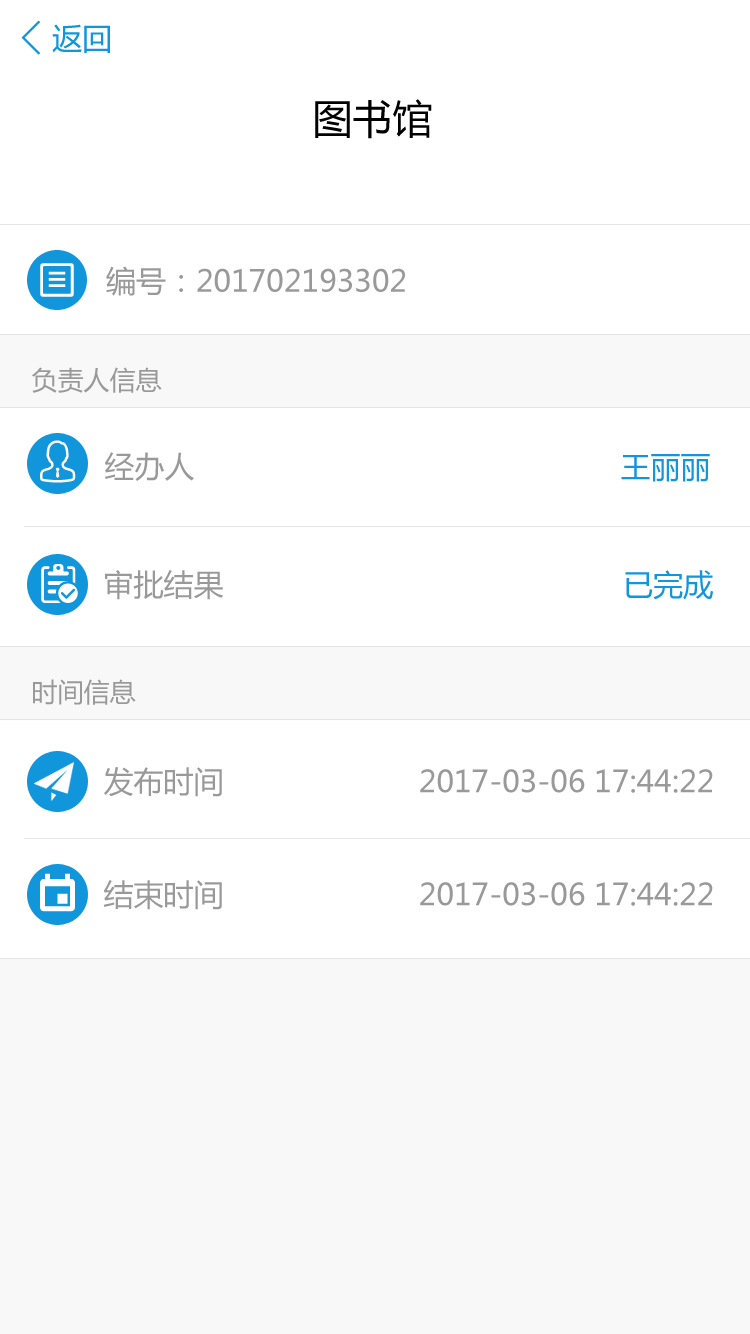
<style>
.page{position:relative;width:750px;height:1334px;background:#ffffff}
.page>*{position:absolute;margin:0}
.t1{font:48px "SimSun";color:#1296db;font-weight:bold}
.t2{font:30px "MicrosoftYaHei";color:#1296db}
.t3{font:40px "MicrosoftYaHei";color:#000000}
.t4{font:30px "MicrosoftYaHei";color:#999999}
.t5{font:26px "MicrosoftYaHei";color:#999999}
</style>
<div class="page">
<p class="t1" style="left:21px;top:20px;width:19px;height:35px">&lt;</p>
<p class="t2" style="left:52px;top:24px;width:58px;height:29px">返回</p>
<p class="t3" style="left:315px;top:99px;width:117px;height:40px">图书馆</p>
<p class="t4" style="left:106px;top:266px;width:299px;height:30px">编号：201702193302</p>
<p class="t5" style="left:32px;top:367px;width:130px;height:26px">负责人信息</p>
<p class="t4" style="left:105px;top:452px;width:605px;height:30px">经办人                                                <span class="t2">王丽丽</span></p>
<p class="t4" style="left:105px;top:570px;width:608px;height:30px">审批结果                                             <span class="t2">已完成</span></p>
<p class="t5" style="left:33px;top:679px;width:103px;height:26px">时间信息</p>
<p class="t4" style="left:104px;top:767px;width:609px;height:30px">发布时间                      2017-03-06 17:44:22</p>
<p class="t4" style="left:103px;top:880px;width:610px;height:30px">结束时间                      2017-03-06 17:44:22</p>
</div>
